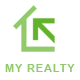
<style>
.page{position:relative;width:80px;height:80px;background:#ffffff}
.page>*{position:absolute;margin:0}
.t1{font:11px "Arial-BoldMT";letter-spacing:0.08em;color:#91c96b}
</style>
<div class="page">
<p class="t1" style="left:5px;top:64px;width:70px;height:8px">MY REALTY</p>
</div>
